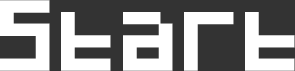
<style>
.page{position:relative;width:295px;height:71px;background:#333333}
.page>*{position:absolute;margin:0}
.t1{font:58.1px "Pixeled";color:#ffffff;font-weight:bold}
</style>
<div class="page">
<p class="t1" style="left:0px;top:0px;width:295px;height:71px">Start</p>
</div>
